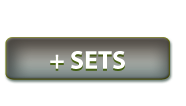
<style>
.page{position:relative;width:186px;height:106px;background:#ffffff}
.page>*{position:absolute;margin:0}
.t1{font:26px "MyriadPro-Bold";color:#ffffff;text-transform:uppercase}
</style>
<div class="page">
<p class="t1" style="left:50px;top:51px;width:75px;height:18px">+ sets</p>
</div>
